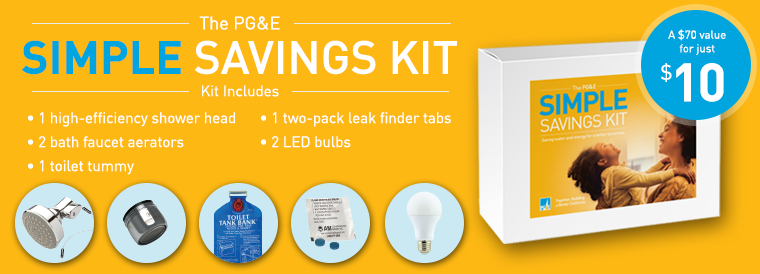
<style>
.page{position:relative;width:760px;height:274px;background:#fdb813}
.page>*{position:absolute;margin:0}
.t1{font:46px/25.7px "DINOT-Medium";color:#ffffff;text-transform:uppercase}
.t2{font:18px/50.5px "DINOT";color:#ffffff;text-transform:uppercase}
.t3{font:18px/50.5px "DINOT";color:#ffffff}
.t4{font:46px/48.4px "DINOT-Bold";color:#00a5df;text-transform:uppercase}
.t5{font:46px/35px "DINOT-Bold";color:#00a5df;text-transform:uppercase}
.t6{font:46px/35px "DINOT-Medium";color:#ffffff;text-transform:uppercase}
.t7{font:11.4px "DINOT";color:#ffffff}
.t8{font:53.1px "DINOT-Bold";letter-spacing:-0.04em;color:#ffffff}
.t9{font:35.4px "DINOT";letter-spacing:-0.08em;color:#ffffff}
.t10{font:15px "DINOT";color:#ffffff}
.t11{font:15px/24px "DINOT";color:#ffffff}
.t12{font:17px/24px "DINOT-Bold";color:#ffffff}
</style>
<div class="page">
<p class="t1" style="left:22px;top:16px;width:435px;height:59px;text-align:center"><span class="t2">T</span><span class="t3">he</span><span class="t2"> PG&amp;E<br></span><span class="t4">Sim</span><span class="t5">ple </span><span class="t6">S</span>avings Kit</p>
<p class="t7" style="left:668px;top:29px;width:58px;height:26px;text-align:center">A $70 value <br>for just</p>
<p class="t8" style="left:661px;top:63px;width:63px;height:39px"><span class="t9">$</span>10</p>
<p class="t10" style="left:202px;top:85px;width:77px;height:12px">Kit Includes</p>
<p class="t11" style="left:28px;top:112px;width:207px;height:63px;text-align:right">• 1 high-efficiency shower head<br>• 2 bath faucet aerators<br>• 1 toilet tummy</p>
<p class="t11" style="left:261px;top:112px;width:190px;height:36px;text-align:right">• 1 two-pack leak finder tabs<br>• 2 LED bulbs<br><span class="t12"></span></p>
</div>
